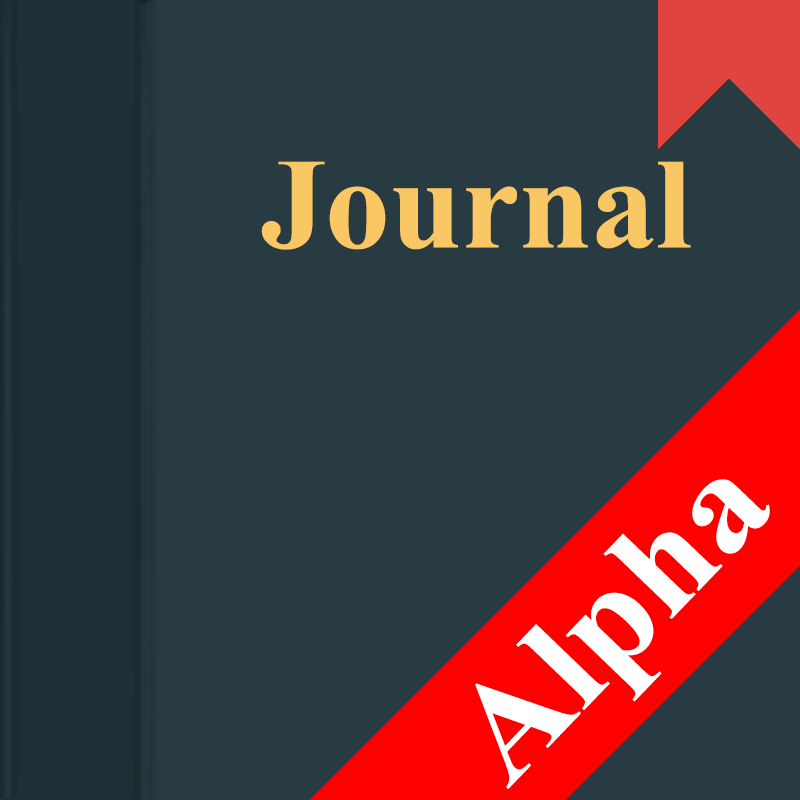
<style>
.page{position:relative;width:800px;height:800px;background:#283a42}
.page>*{position:absolute;margin:0}
.t1{font:129.3px "TimesNewRomanPS-BoldMT";color:#f9c764}
.t2{font:141.7px "TimesNewRomanPS-BoldMT";color:#ffffff;scale:1.05 1}
</style>
<div class="page">
<p class="t1" style="left:261px;top:161px;width:430px;height:89px">Journal</p>
<p class="t2" style="left:475px;top:479px;width:295px;height:310px;rotate:-46deg">Alpha</p>
</div>
